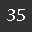
<style>
.page{position:relative;width:32px;height:32px;background:#333333}
.page>*{position:absolute;margin:0}
.t1{font:17.8px "MyriadPro-Regular";color:#ffffff;scale:1.12 1}
</style>
<div class="page">
<p class="t1" style="left:7px;top:9px;width:18px;height:12px">35</p>
</div>
